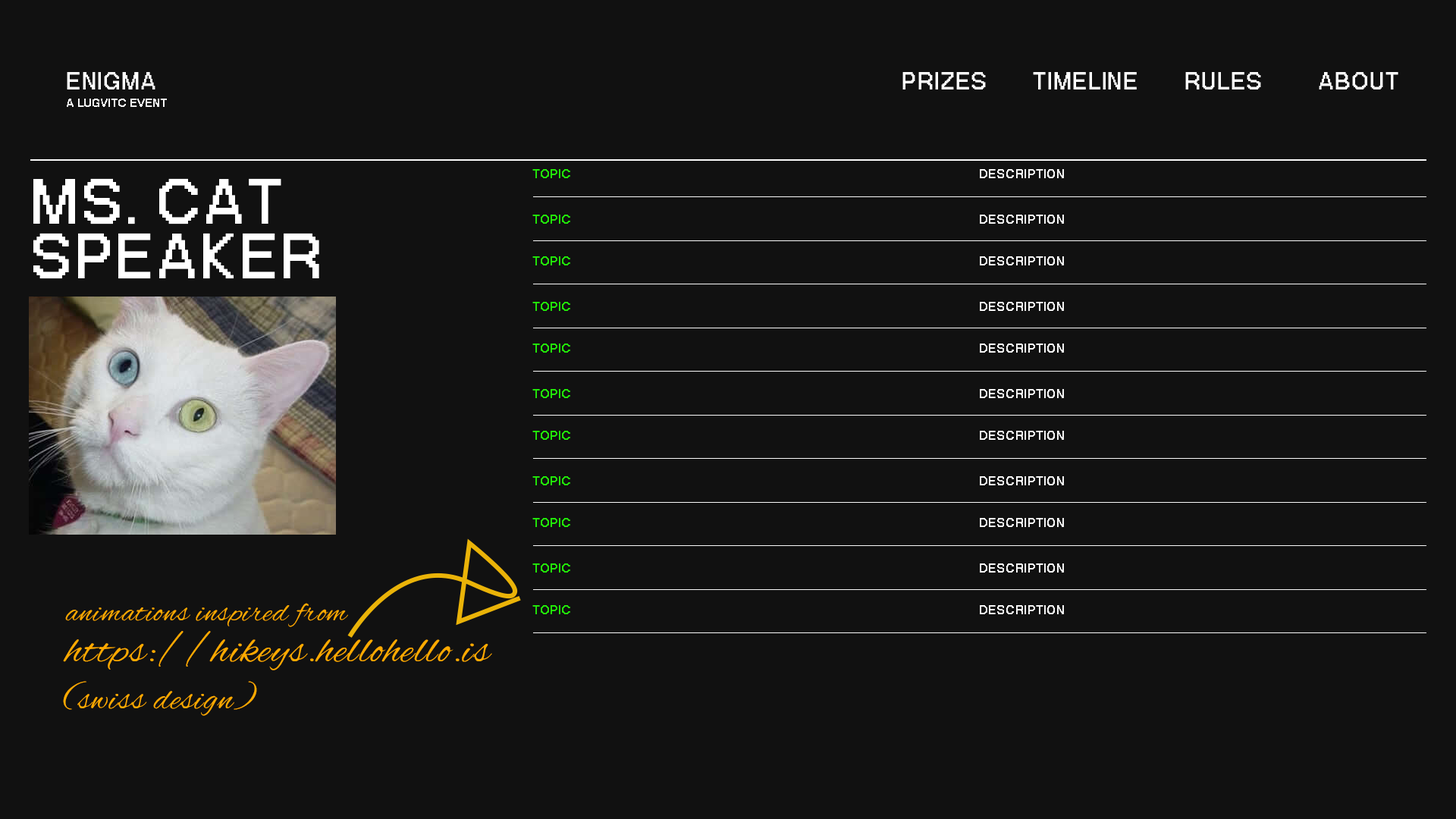
<style>
.page{position:relative;width:1456px;height:819px;background:#111111}
.page>*{position:absolute;margin:0}
.t1{font:33.8px "PPNeueBit-Bold";letter-spacing:0.03em;color:#ffffff}
.t2{font:16.7px "PPNeueBit-Bold";letter-spacing:0.03em;color:#ffffff}
.t3{font:18.2px "PPNeueBit-Bold";letter-spacing:0.03em;color:#22ec08}
.t4{font:18.2px "PPNeueBit-Bold";letter-spacing:0.03em;color:#ffffff}
.t5{font:89.2px "PPNeueBit-Bold";letter-spacing:0.03em;color:#ffffff}
.t6{font:43.3px/40.7px "AlexBrush-Regular";letter-spacing:0.03em;color:#ffaa00}
.t7{font:31.2px/40.7px "AlexBrush-Regular";letter-spacing:0.03em;color:#ffaa00}
.t8{font:35.4px "AlexBrush-Regular";letter-spacing:0.03em;color:#ffaa00}
</style>
<div class="page">
<p class="t1" style="left:67px;top:72px;width:88px;height:17px">ENIGMA</p>
<p class="t1" style="left:902px;top:72px;width:84px;height:17px">PRIZES</p>
<p class="t1" style="left:1033px;top:72px;width:104px;height:17px">TIMELINE</p>
<p class="t1" style="left:1185px;top:72px;width:76px;height:17px">RULES</p>
<p class="t1" style="left:1319px;top:72px;width:79px;height:17px">ABOUT</p>
<p class="t2" style="left:67px;top:99px;width:100px;height:8px">A LUGVITC EVENT</p>
<p class="t3" style="left:532px;top:169px;width:38px;height:9px">TOPIC</p>
<p class="t4" style="left:980px;top:169px;width:84px;height:9px">DESCRIPTION</p>
<p class="t5" style="left:33px;top:178px;width:248px;height:46px">MS. CAT</p>
<p class="t3" style="left:532px;top:215px;width:38px;height:9px">TOPIC</p>
<p class="t4" style="left:980px;top:215px;width:84px;height:9px">DESCRIPTION</p>
<p class="t5" style="left:33px;top:233px;width:286px;height:46px">SPEAKER</p>
<p class="t3" style="left:532px;top:256px;width:38px;height:9px">TOPIC</p>
<p class="t4" style="left:980px;top:256px;width:84px;height:9px">DESCRIPTION</p>
<p class="t3" style="left:532px;top:302px;width:38px;height:9px">TOPIC</p>
<p class="t4" style="left:980px;top:302px;width:84px;height:9px">DESCRIPTION</p>
<p class="t3" style="left:532px;top:344px;width:38px;height:9px">TOPIC</p>
<p class="t4" style="left:980px;top:344px;width:84px;height:9px">DESCRIPTION</p>
<p class="t3" style="left:532px;top:389px;width:38px;height:9px">TOPIC</p>
<p class="t4" style="left:980px;top:389px;width:84px;height:9px">DESCRIPTION</p>
<p class="t3" style="left:532px;top:431px;width:38px;height:9px">TOPIC</p>
<p class="t4" style="left:980px;top:431px;width:84px;height:9px">DESCRIPTION</p>
<p class="t3" style="left:532px;top:476px;width:38px;height:9px">TOPIC</p>
<p class="t4" style="left:980px;top:476px;width:84px;height:9px">DESCRIPTION</p>
<p class="t3" style="left:532px;top:518px;width:38px;height:9px">TOPIC</p>
<p class="t4" style="left:980px;top:518px;width:84px;height:9px">DESCRIPTION</p>
<p class="t3" style="left:532px;top:563px;width:38px;height:10px">TOPIC</p>
<p class="t4" style="left:980px;top:563px;width:84px;height:10px">DESCRIPTION</p>
<p class="t6" style="left:63px;top:603px;width:429px;height:67px"><span class="t7">animations inspired from<br></span>https://hikeys.hellohello.is</p>
<p class="t3" style="left:532px;top:605px;width:38px;height:9px">TOPIC</p>
<p class="t4" style="left:980px;top:605px;width:84px;height:9px">DESCRIPTION</p>
<p class="t8" style="left:63px;top:681px;width:194px;height:35px">(swiss design)</p>
</div>
